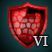
<style>
.page{position:relative;width:52px;height:52px}
.page>*{position:absolute;margin:0}
.t1{font:14px "Vani";color:#dadada}
</style>
<div class="page">
<p class="t1" style="left:33px;top:36px;width:15px;height:10px">VI</p>
</div>
